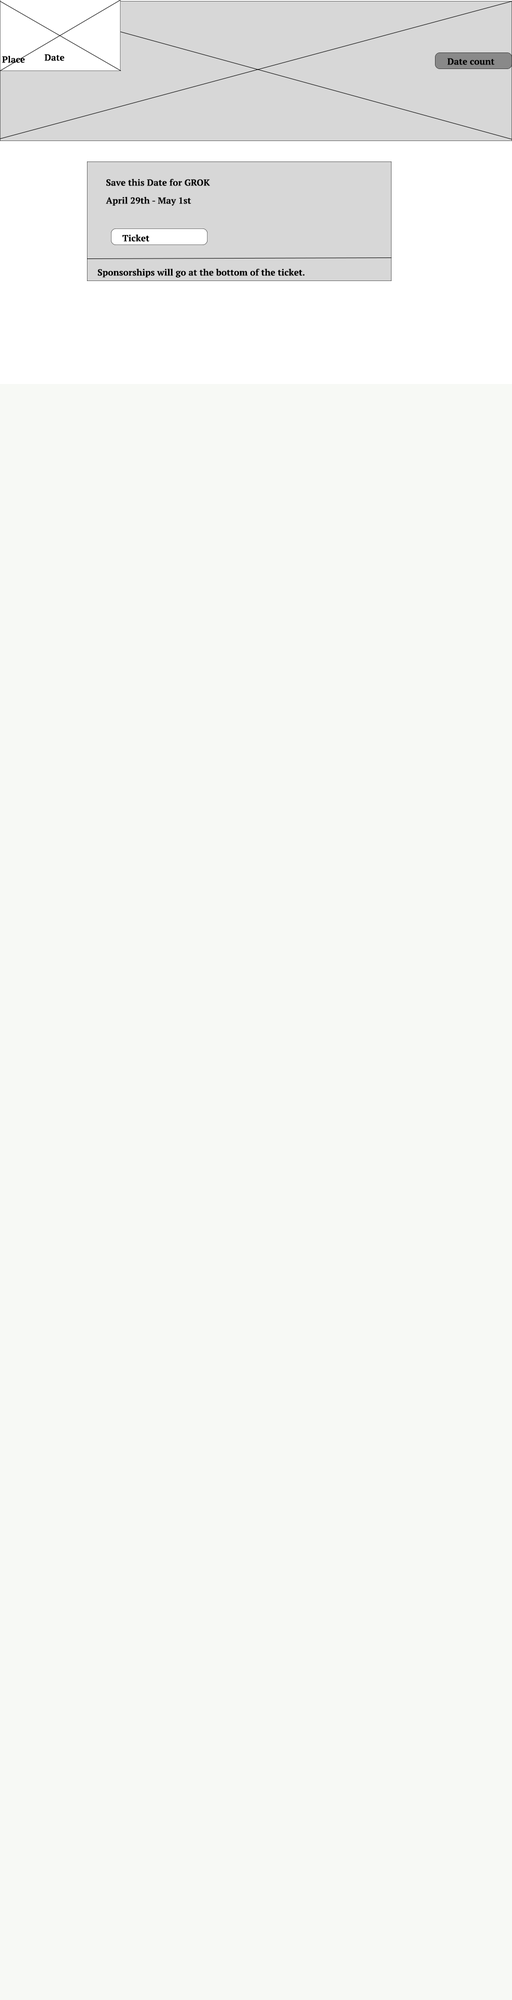
<style>
.page{position:relative;width:512px;height:2000px;background:#f7f9f5}
.page>*{position:absolute;margin:0}
.t1{font:9px "PTSerif-Bold";color:#000000}
.t2{font:9px/9px "PTSerif-Bold";color:#000000}
</style>
<div class="page">
<p class="t1" style="left:44px;top:54px;width:20px;height:7px">Date</p>
<p class="t1" style="left:2px;top:56px;width:23px;height:7px">Place</p>
<p class="t1" style="left:448px;top:58px;width:46px;height:7px">Date count</p>
<p class="t2" style="left:106px;top:178px;width:104px;height:28px">Save this Date for GROK<br><br>April 29th - May 1st</p>
<p class="t1" style="left:122px;top:234px;width:28px;height:8px">Ticket</p>
<p class="t1" style="left:98px;top:268px;width:206px;height:10px">Sponsorships will go at the bottom of the ticket.</p>
</div>
